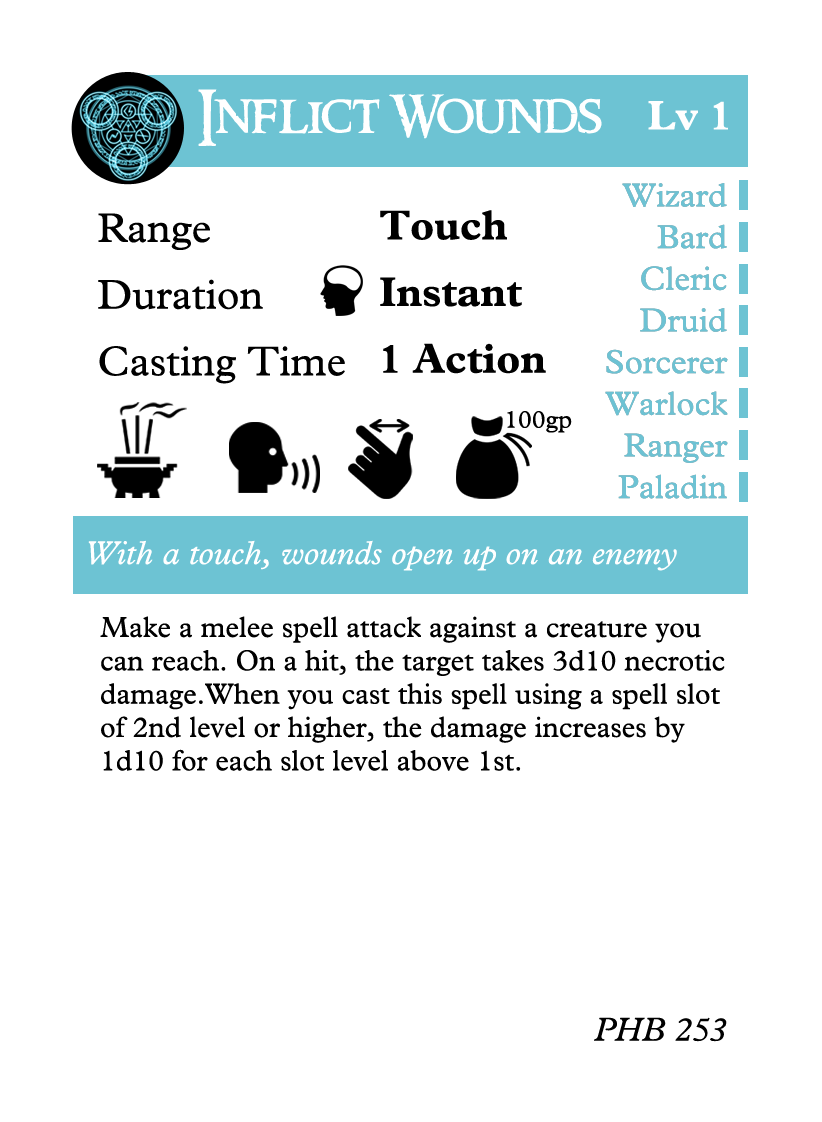
<style>
.page{position:relative;width:822px;height:1122px;background:#ffffff}
.page>*{position:absolute;margin:0}
.t1{font:54.2px "RingbearerMedium";color:#ffffff}
.t2{font:41.7px "MPlantin-Bold";color:#ffffff}
.t3{font:33.3px/41.7px "MPlantin";color:#6dc2d3}
.t4{font:41.7px/66.7px "MPlantin";color:#000000}
.t5{font:41.7px/66.7px "MPlantin-Bold";color:#000000}
.t6{font:25px "MPlantin";color:#000000}
.t7{font:33.3px "MPlantin-Italic";color:#ffffff}
.t8{font:29.2px/33.3px "MPlantin";color:#000000}
.t9{font:33.3px "MPlantin-Italic";color:#000000}
</style>
<div class="page">
<p class="t1" style="left:198px;top:89px;width:404px;height:57px">Inflict Wounds</p>
<p class="t2" style="left:648px;top:101px;width:80px;height:29px">Lv 1</p>
<p class="t3" style="left:605px;top:183px;width:123px;height:316px;text-align:right">Wizard<br>Bard<br>Cleric<br>Druid<br>Sorcerer<br>Warlock<br>Ranger<br>Paladin</p>
<p class="t4" style="left:98px;top:213px;width:247px;height:171px">Range<br>Duration<br>Casting Time</p>
<p class="t5" style="left:380px;top:210px;width:166px;height:164px">Touch<br>Instant<br>1 Action</p>
<p class="t6" style="left:507px;top:411px;width:65px;height:22px">100gp</p>
<p class="t7" style="left:88px;top:540px;width:589px;height:31px">With a touch, wounds open up on an enemy</p>
<p class="t8" style="left:100px;top:616px;width:625px;height:155px">Make a melee spell attack against a creature you can reach. On a hit, the target takes 3d10 necrotic damage.When you cast this spell using a spell slot of 2nd level or higher, the damage increases by 1d10 for each slot level above 1st.</p>
<p class="t9" style="left:594px;top:1017px;width:133px;height:25px">PHB 253</p>
</div>
